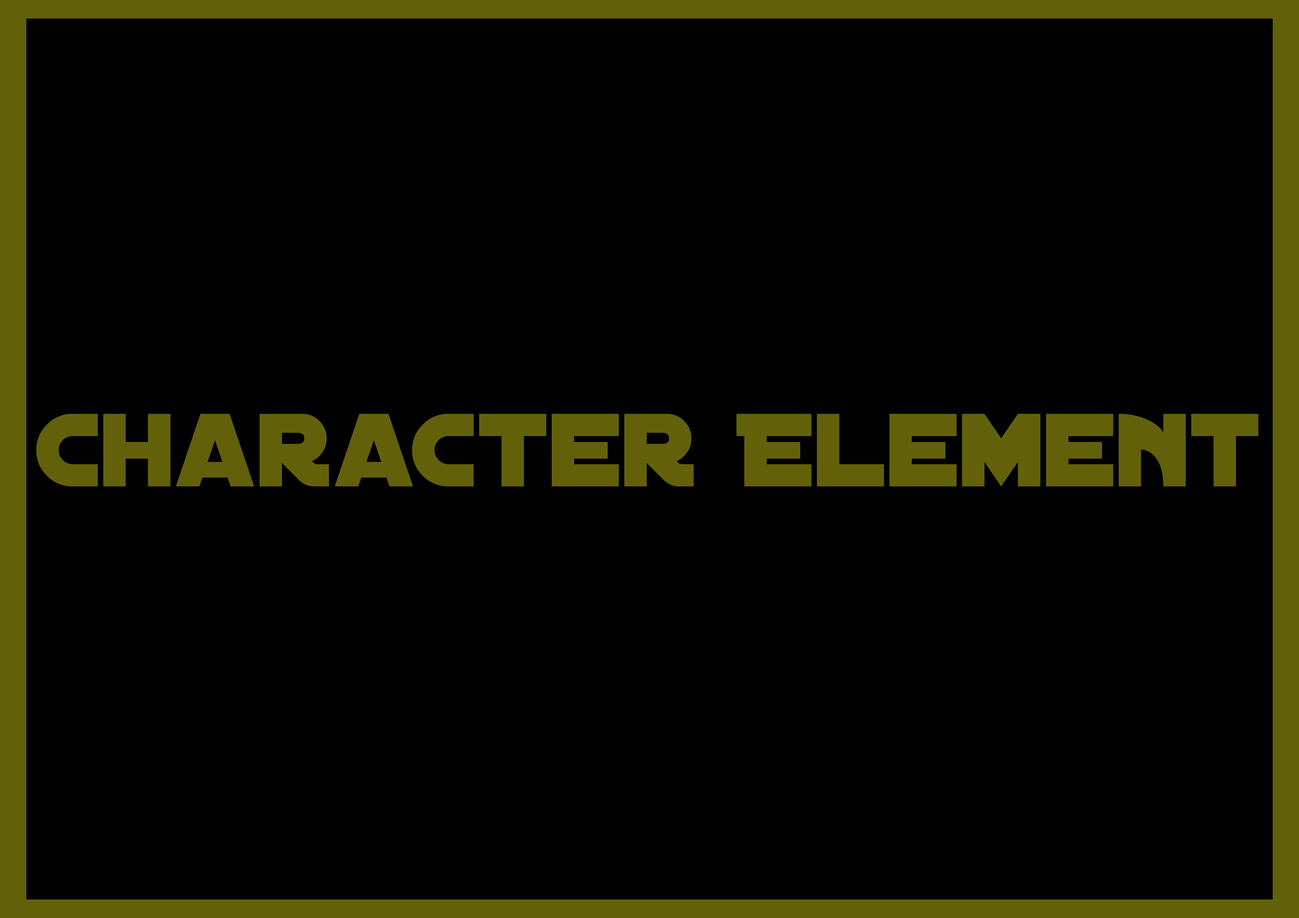
<style>
.page{position:relative;width:1299px;height:918px;background:#000000}
.page>*{position:absolute;margin:0}
.t1{font:26.8px "DistantGalaxy";color:#62610a}
</style>
<div class="page">
<p class="t1" style="left:36px;top:414px;width:1222px;height:72px">Character Element</p>
</div>
